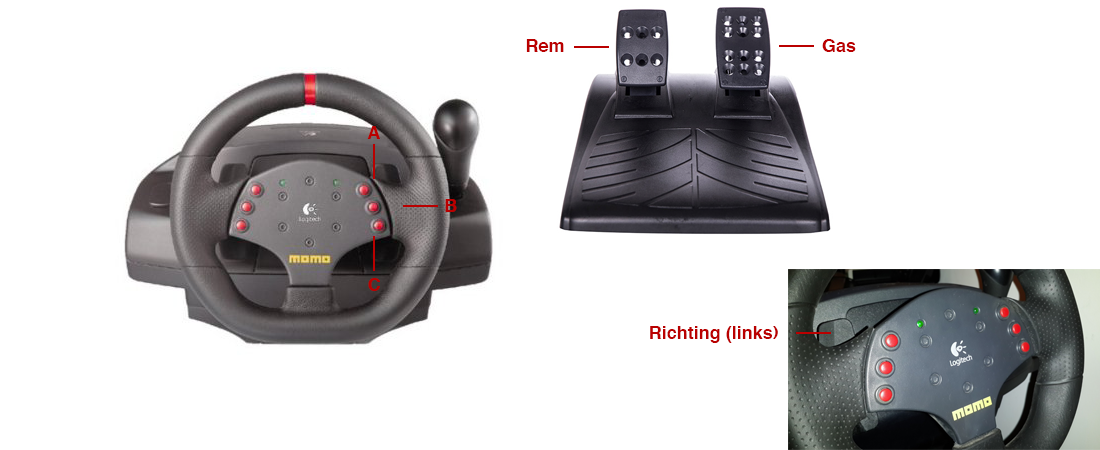
<style>
.page{position:relative;width:1100px;height:450px;background:#ffffff}
.page>*{position:absolute;margin:0}
.t1{font:18px "Helvetica-Bold";color:#ba0000}
</style>
<div class="page">
<p class="t1" style="left:526px;top:39px;width:38px;height:13px">Rem</p>
<p class="t1" style="left:822px;top:39px;width:34px;height:13px">Gas</p>
<p class="t1" style="left:367px;top:126px;width:13px;height:13px">A</p>
<p class="t1" style="left:445px;top:199px;width:12px;height:13px">B</p>
<p class="t1" style="left:368px;top:278px;width:12px;height:13px">C</p>
<p class="t1" style="left:650px;top:326px;width:128px;height:17px">Richting (links)</p>
</div>
